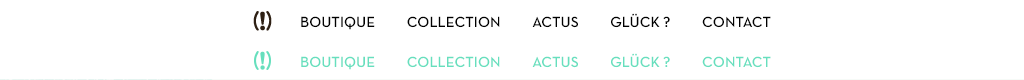
<style>
.page{position:relative;width:1024px;height:80px;background:#ffffff}
.page>*{position:absolute;margin:0}
.t1{font:15px "NeutraText-DemiSCAlt";color:#000000;text-transform:uppercase}
.t2{font:15px "NeutraText-DemiSCAlt";color:#66dfbe;text-transform:uppercase}
</style>
<div class="page">
<p class="t1" style="left:301px;top:13px;width:470px;height:17px">boutique          collection          actus          glück ?          contact</p>
<p class="t2" style="left:301px;top:53px;width:470px;height:17px">boutique          collection          actus          glück ?          contact</p>
</div>
